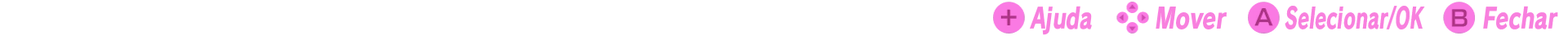
<style>
.page{position:relative;width:1568px;height:36px;background:#ffffff}
.page>*{position:absolute;margin:0}
.t1{font:28.3px "RodinPro-EB";color:#f880de;font-style:italic;scale:0.72 1}
.t2{font:28.3px "RodinPro-EB";color:#f880de;font-style:italic;scale:0.65 1}
.t3{font:28.3px "RodinPro-EB";color:#f880de;font-style:italic;scale:0.74 1}
.t4{font:28.3px "RodinPro-EB";color:#f880de;font-style:italic;scale:0.77 1}
</style>
<div class="page">
<p class="t1" style="left:1030px;top:6px;width:62px;height:29px">Ajuda</p>
<p class="t2" style="left:1285px;top:6px;width:140px;height:23px">Selecionar/OK</p>
<p class="t3" style="left:1483px;top:6px;width:75px;height:23px">Fechar</p>
<p class="t4" style="left:1156px;top:7px;width:71px;height:22px">Mover</p>
</div>
